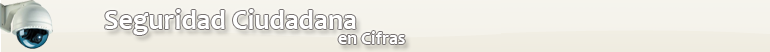
<style>
.page{position:relative;width:770px;height:52px}
.page>*{position:absolute;margin:0}
.t1{font:28px "Candara-Bold";color:#ffffff}
.t2{font:18px "Candara-Bold";color:#ffffff}
</style>
<div class="page">
<p class="t1" style="left:105px;top:9px;width:251px;height:26px">Seguridad Ciudadana</p>
<p class="t2" style="left:338px;top:31px;width:67px;height:13px">en Cifras</p>
</div>
